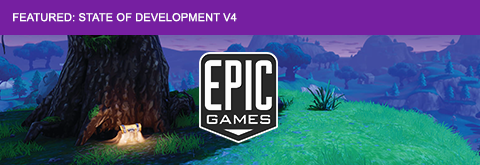
<style>
.page{position:relative;width:480px;height:165px;background:#761fa1}
.page>*{position:absolute;margin:0}
.t1{font:11px "ArialMT";letter-spacing:0.015em;color:#ffffff}
</style>
<div class="page">
<p class="t1" style="left:13px;top:13px;width:224px;height:9px">FEATURED: STATE OF DEVELOPMENT V4</p>
</div>
